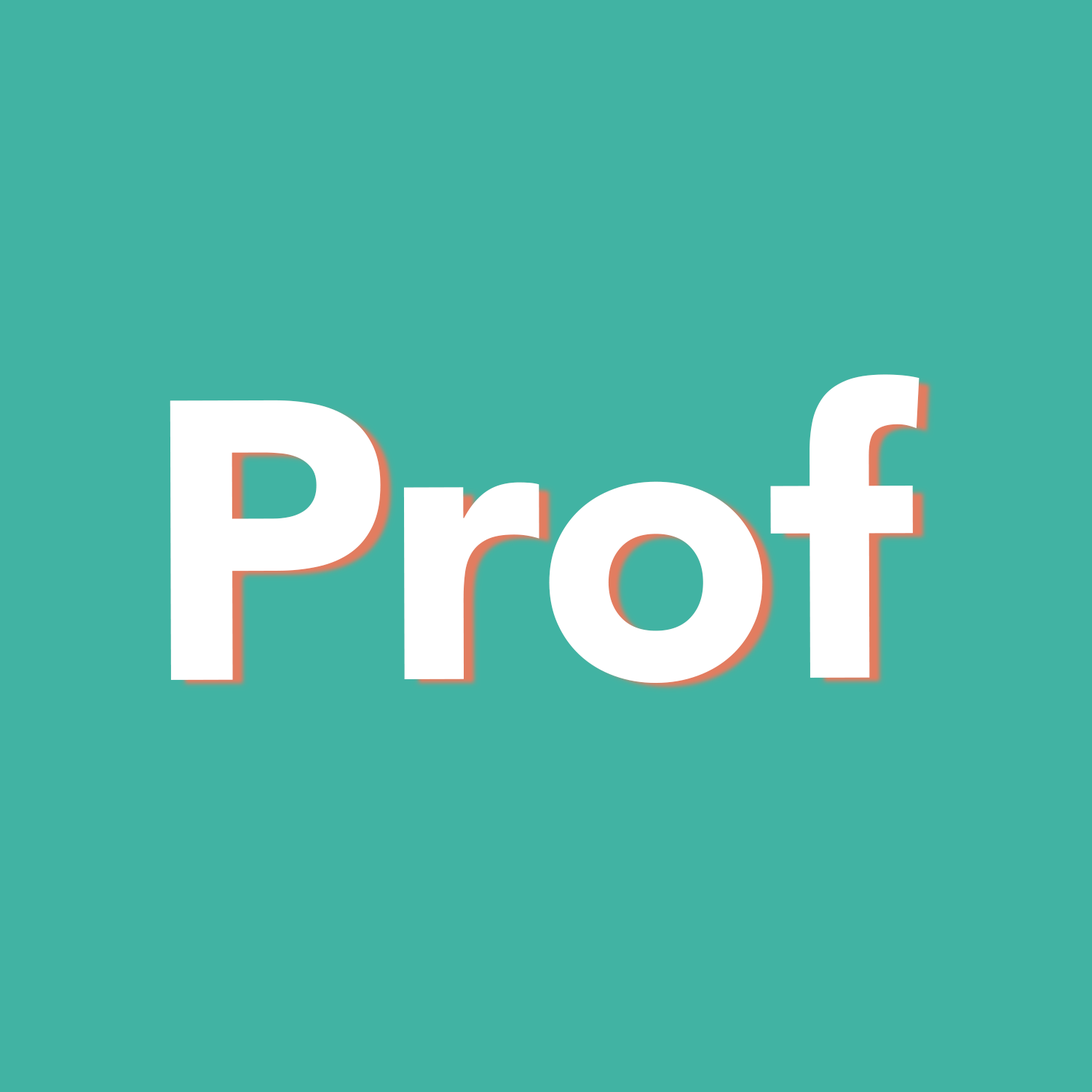
<style>
.page{position:relative;width:1092px;height:1092px;background:#41b3a3}
.page>*{position:absolute;margin:0}
.t1{font:394.3px "Avenir-Black";letter-spacing:-0.02em;color:#ffffff}
</style>
<div class="page">
<p class="t1" style="left:170px;top:374px;width:749px;height:310px">Prof</p>
</div>
